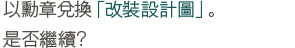
<style>
.page{position:relative;width:295px;height:48px;background:#ffffff}
.page>*{position:absolute;margin:0}
.t1{font:18px/30px "GothicMB101Pr6N-Light";color:#185a5b}
.t2{font:18px/30px "GothicMB101Pr6N-Light";color:#4d4944}
</style>
<div class="page">
<p class="t1" style="left:3px;top:0px;width:211px;height:48px"><span class="t2">以勳章兌換</span>「改裝設計圖」<span class="t2">。<br>是否繼續?</span></p>
</div>
